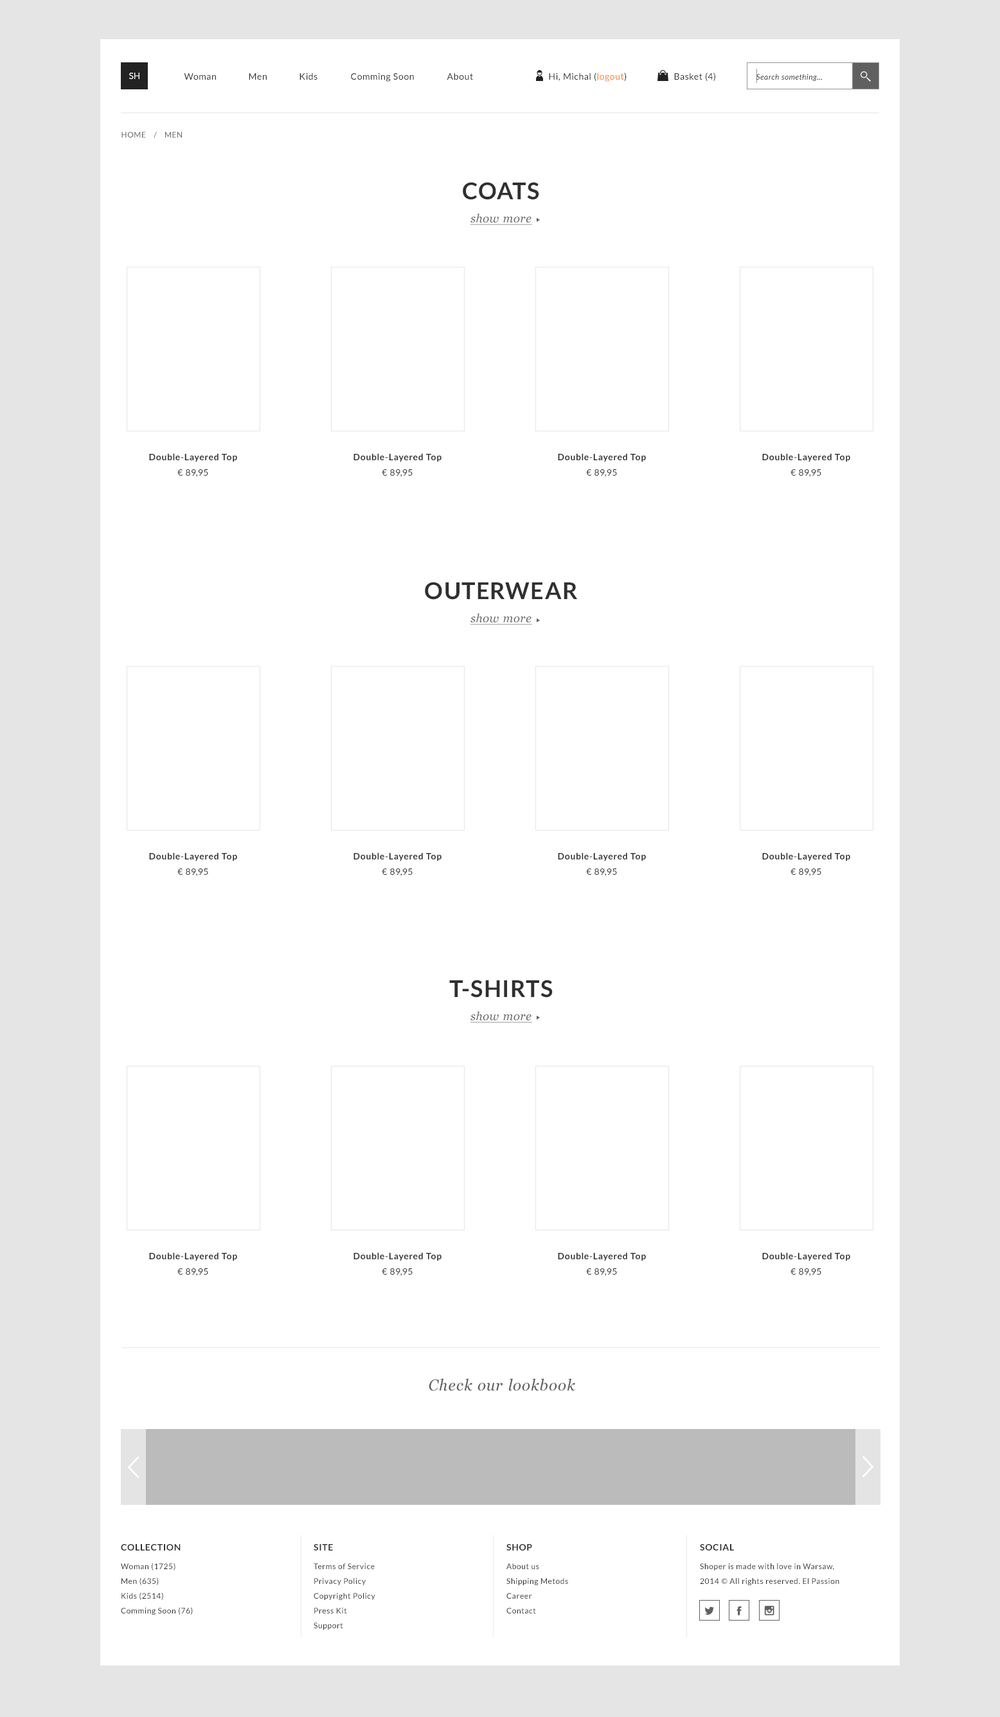
<style>
.page{position:relative;width:1000px;height:1717px;background:#ffffff}
.page>*{position:absolute;margin:0}
.t1{font:9px "Lato-Regular";color:#ffffff;text-transform:uppercase}
.t2{font:9px "Lato-Regular";letter-spacing:0.05em;color:#303030}
.t3{font:9px "Lato-Regular";letter-spacing:0.05em;color:#f68236}
.t4{font:7.7px "Lato-Italic";letter-spacing:0.05em;color:#303030}
.t5{font:7.7px "Lato-Regular";letter-spacing:0.05em;color:#606060;text-transform:uppercase}
.t6{font:11.6px/23.1px "Georgia-Italic";letter-spacing:0.05em;color:#606060;text-decoration:underline}
.t7{font:23.1px/23.1px "Lato-Bold";letter-spacing:0.05em;color:#303030;text-transform:uppercase}
.t8{font:9px/15.4px "Lato-Bold";letter-spacing:0.05em;color:#303030}
.t9{font:9px/15.4px "Lato-Regular";letter-spacing:0.05em;color:#303030}
.t10{font:15.4px "Georgia-Italic";letter-spacing:0.05em;color:#606060}
.t11{font:9px "Lato-Bold";letter-spacing:0.05em;color:#303030;text-transform:uppercase}
.t12{font:7.7px/14.8px "Lato-Regular";letter-spacing:0.05em;color:#303030}
</style>
<div class="page">
<p class="t1" style="left:129px;top:73px;width:11px;height:6px">sh</p>
<p class="t2" style="left:184px;top:73px;width:32px;height:7px">Woman</p>
<p class="t2" style="left:249px;top:73px;width:18px;height:7px">Men</p>
<p class="t2" style="left:300px;top:73px;width:18px;height:7px">Kids</p>
<p class="t2" style="left:351px;top:73px;width:63px;height:9px">Comming Soon</p>
<p class="t2" style="left:447px;top:73px;width:26px;height:7px">About</p>
<p class="t2" style="left:549px;top:73px;width:78px;height:9px">Hi, Michal (<span class="t3">logout</span>)</p>
<p class="t2" style="left:674px;top:73px;width:42px;height:8px">Basket (4)</p>
<p class="t4" style="left:756px;top:74px;width:66px;height:7px">Search something...</p>
<p class="t5" style="left:122px;top:132px;width:60px;height:6px">HOME    /    Men</p>
<p class="t6" style="left:463px;top:182px;width:76px;height:43px;text-align:center"><span class="t7">Coats<br></span>show more</p>
<p class="t8" style="left:149px;top:453px;width:88px;height:24px;text-align:center">Double-Layered Top<br><span class="t9">€ 89,95</span></p>
<p class="t8" style="left:354px;top:453px;width:88px;height:24px;text-align:center">Double-Layered Top<br><span class="t9">€ 89,95</span></p>
<p class="t8" style="left:558px;top:453px;width:88px;height:24px;text-align:center">Double-Layered Top<br><span class="t9">€ 89,95</span></p>
<p class="t8" style="left:762px;top:453px;width:89px;height:24px;text-align:center">Double-Layered Top<br><span class="t9">€ 89,95</span></p>
<p class="t7" style="left:425px;top:582px;width:152px;height:43px;text-align:center">Outerwear<br><span class="t6">show more</span></p>
<p class="t8" style="left:149px;top:852px;width:88px;height:24px;text-align:center">Double-Layered Top<br><span class="t9">€ 89,95</span></p>
<p class="t8" style="left:354px;top:852px;width:88px;height:24px;text-align:center">Double-Layered Top<br><span class="t9">€ 89,95</span></p>
<p class="t8" style="left:558px;top:852px;width:88px;height:24px;text-align:center">Double-Layered Top<br><span class="t9">€ 89,95</span></p>
<p class="t8" style="left:762px;top:852px;width:89px;height:24px;text-align:center">Double-Layered Top<br><span class="t9">€ 89,95</span></p>
<p class="t6" style="left:449px;top:980px;width:104px;height:43px;text-align:center"><span class="t7">T-shirts<br></span>show more</p>
<p class="t8" style="left:149px;top:1252px;width:88px;height:24px;text-align:center">Double-Layered Top<br><span class="t9">€ 89,95</span></p>
<p class="t8" style="left:354px;top:1252px;width:88px;height:24px;text-align:center">Double-Layered Top<br><span class="t9">€ 89,95</span></p>
<p class="t8" style="left:558px;top:1252px;width:88px;height:24px;text-align:center">Double-Layered Top<br><span class="t9">€ 89,95</span></p>
<p class="t8" style="left:762px;top:1252px;width:89px;height:24px;text-align:center">Double-Layered Top<br><span class="t9">€ 89,95</span></p>
<p class="t10" style="left:429px;top:1378px;width:146px;height:13px">Check our lookbook</p>
<p class="t11" style="left:121px;top:1544px;width:60px;height:7px">Collection</p>
<p class="t11" style="left:314px;top:1544px;width:19px;height:7px">site</p>
<p class="t11" style="left:507px;top:1544px;width:25px;height:7px">Shop</p>
<p class="t11" style="left:700px;top:1544px;width:34px;height:7px">social</p>
<p class="t12" style="left:121px;top:1563px;width:72px;height:52px">Woman (1725)<br>Men (635)<br>Kids (2514)<br>Comming Soon (76)</p>
<p class="t12" style="left:314px;top:1563px;width:61px;height:67px">Terms of Service <br>Privacy Policy <br>Copyright Policy <br>Press Kit <br>Support</p>
<p class="t12" style="left:507px;top:1563px;width:61px;height:51px">About us<br>Shipping Metods<br>Career<br>Contact</p>
<p class="t12" style="left:700px;top:1563px;width:140px;height:22px">Shoper is made with love in Warsaw, <br>2014 © All rights reserved. El Passion</p>
</div>
